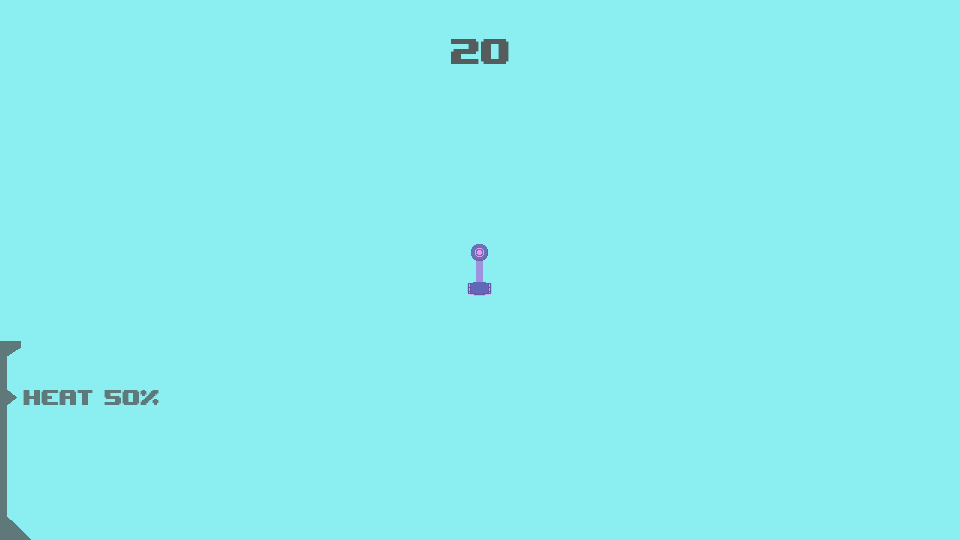
<style>
.page{position:relative;width:960px;height:540px;background:#8beff2}
.page>*{position:absolute;margin:0}
.t1{font:50px "UpheavalTT-BRK-";color:#545c5c}
.t2{font:30px "UpheavalTT-BRK-";color:#5f797b}
</style>
<div class="page">
<p class="t1" style="left:451px;top:39px;width:58px;height:25px">20</p>
<p class="t2" style="left:23px;top:390px;width:136px;height:15px">HEAT 50%</p>
</div>
